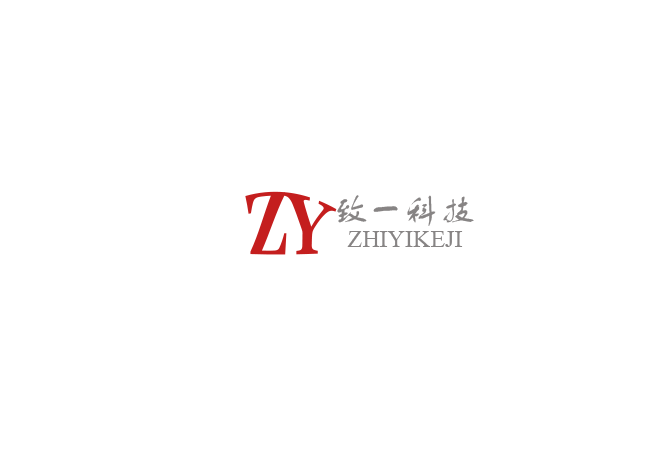
<style>
.page{position:relative;width:650px;height:459px;background:#ffffff}
.page>*{position:absolute;margin:0}
.t1{font:72px "Vani-Bold";color:#c41e1e}
.t2{font:36px "FZSTK--GBK1-0";color:#878484}
.t3{font:24px "TimesNewRomanPSMT";color:#878484}
</style>
<div class="page">
<p class="t1" style="left:245px;top:191px;width:92px;height:64px">ZY</p>
<p class="t2" style="left:337px;top:195px;width:137px;height:31px">致一科技</p>
<p class="t3" style="left:347px;top:231px;width:116px;height:16px">ZHIYIKEJI</p>
</div>
